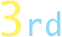
<style>
.page{position:relative;width:62px;height:37px;background:#ffffff}
.page>*{position:absolute;margin:0}
.t1{font:32px "LucidaSans-Typewriter"}
.t2{font:48px "LucidaSans-Typewriter"}
</style>
<div class="page">
<p class="t1" style="left:1px;top:0px;width:60px;height:37px"><span class="t2">3</span>rd</p>
</div>
